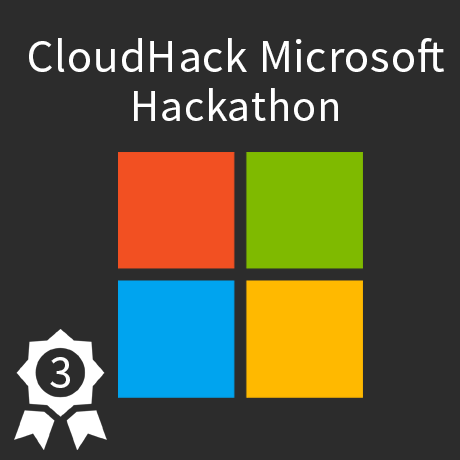
<style>
.page{position:relative;width:460px;height:460px;background:#2c2c2c}
.page>*{position:absolute;margin:0}
.t1{font:47px "SourceSansPro-Regular";letter-spacing:0.015em;color:#ffffff}
.t2{font:45px "SourceSansPro-Regular";letter-spacing:0.015em;color:#ffffff}
.t3{font:48px "SourceSansPro-Regular";letter-spacing:0.015em;color:#ffffff}
</style>
<div class="page">
<p class="t1" style="left:29px;top:38px;width:415px;height:34px">CloudHack Microsoft</p>
<p class="t2" style="left:134px;top:88px;width:204px;height:33px">Hackathon</p>
<p class="t3" style="left:50px;top:357px;width:20px;height:31px">3</p>
</div>
